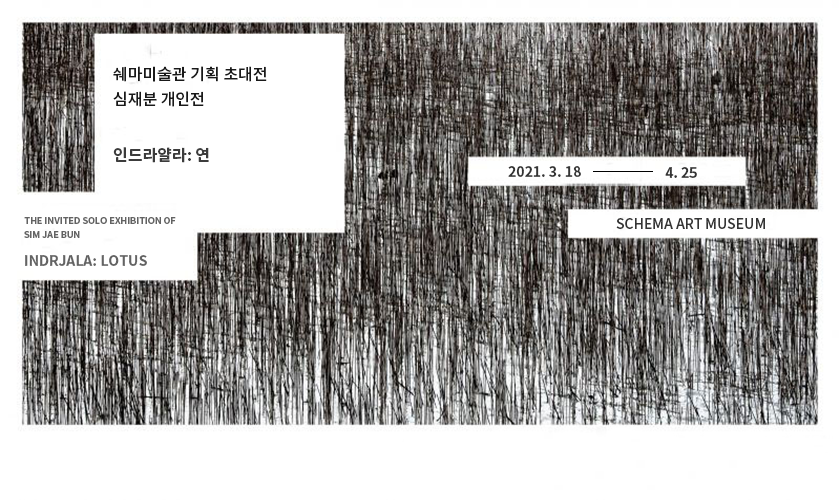
<style>
.page{position:relative;width:839px;height:500px;background:#ffffff}
.page>*{position:absolute;margin:0}
.t1{font:16px "NotoSansCJKkr-Medium";color:#191919}
.t2{font:16px "NotoSansCJKkr-Bold";color:#3c3c3c}
.t3{font:14px "NotoSansCJKkr-Bold";color:#343434}
.t4{font:9px "NotoSansCJKkr-Bold";color:#636363}
.t5{font:14px "NotoSansCJKkr-Medium";color:#343434}
.t6{font:14px "NotoSansCJKkr-Bold";color:#636363}
</style>
<div class="page">
<p class="t1" style="left:113px;top:66px;width:154px;height:16px">쉐마미술관 기획 초대전</p>
<p class="t1" style="left:113px;top:91px;width:91px;height:16px">심재분 개인전</p>
<p class="t2" style="left:113px;top:147px;width:96px;height:16px">인드라얄라: 연</p>
<p class="t3" style="left:508px;top:166px;width:73px;height:11px">2021. 3. 18</p>
<p class="t3" style="left:665px;top:167px;width:32px;height:11px">4. 25</p>
<p class="t4" style="left:24px;top:217px;width:152px;height:7px">THE INVITED SOLO EXHIBITION OF</p>
<p class="t5" style="left:616px;top:218px;width:149px;height:11px">SCHEMA ART MUSEUM</p>
<p class="t4" style="left:24px;top:231px;width:56px;height:7px">SIM JAE BUN</p>
<p class="t6" style="left:25px;top:255px;width:122px;height:11px">INDRJALA: LOTUS</p>
</div>
